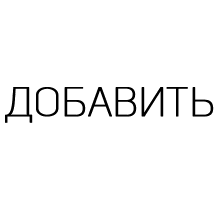
<style>
.page{position:relative;width:217px;height:212px;background:#ffffff}
.page>*{position:absolute;margin:0}
.t1{font:40px "UniSansThinCAPS";letter-spacing:-0.005em;color:#000000;font-weight:bold}
</style>
<div class="page">
<p class="t1" style="left:5px;top:87px;width:209px;height:36px">Добавить</p>
</div>
